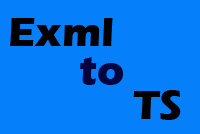
<style>
.page{position:relative;width:200px;height:134px;background:#067ffb}
.page>*{position:absolute;margin:0}
.t1{font:41.7px "ErasITC-Bold";color:#000000}
.t2{font:41.7px "ErasITC-Bold";color:#02043f}
</style>
<div class="page">
<p class="t1" style="left:10px;top:18px;width:171px;height:102px">Exml <br>            TS</p>
<p class="t2" style="left:80px;top:57px;width:43px;height:28px">to</p>
</div>
